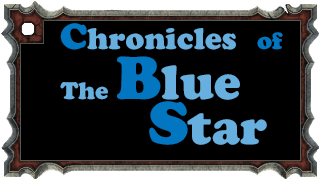
<style>
.page{position:relative;width:320px;height:180px;background:#000000}
.page>*{position:absolute;margin:0}
.t1{font:30px "CooperBlackStd";color:#66afde}
.t2{font:48px "CooperBlackStd";color:#0276c0}
.t3{font:36px "CooperBlackStd";color:#0276c0}
.t4{font:24px "CooperBlackStd";color:#0276c0}
.t5{font:24px "CooperBlackStd";color:#66afde}
.t6{font:60px "CooperBlackStd";color:#0276c0}
.t7{font:48px "CooperBlackStd";color:#66afde}
</style>
<div class="page">
<p class="t1" style="left:60px;top:23px;width:176px;height:27px"><span class="t2">    </span><span class="t3">C</span>hronicles</p>
<p class="t4" style="left:257px;top:32px;width:26px;height:18px">of</p>
<p class="t5" style="left:60px;top:56px;width:180px;height:44px">The <span class="t6">B</span><span class="t7">lue</span></p>
<p class="t7" style="left:149px;top:101px;width:118px;height:44px"><span class="t6">S</span>tar</p>
</div>
